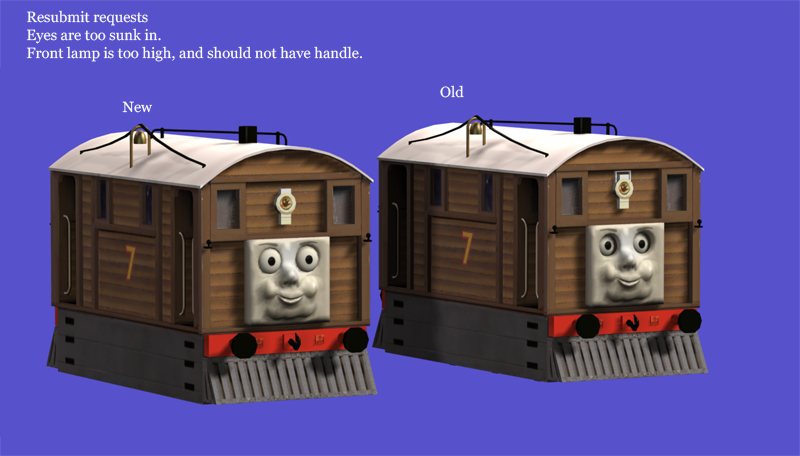
<style>
.page{position:relative;width:800px;height:456px;background:#5751cc}
.page>*{position:absolute;margin:0}
.t1{font:14.8px "Georgia";color:#fafafa}
</style>
<div class="page">
<p class="t1" style="left:26px;top:10px;width:337px;height:52px">Resubmit requests<br>Eyes are too sunk in.<br>Front lamp is too high, and should not have handle.</p>
<p class="t1" style="left:440px;top:85px;width:24px;height:13px">Old</p>
<p class="t1" style="left:122px;top:101px;width:31px;height:12px">New</p>
</div>
